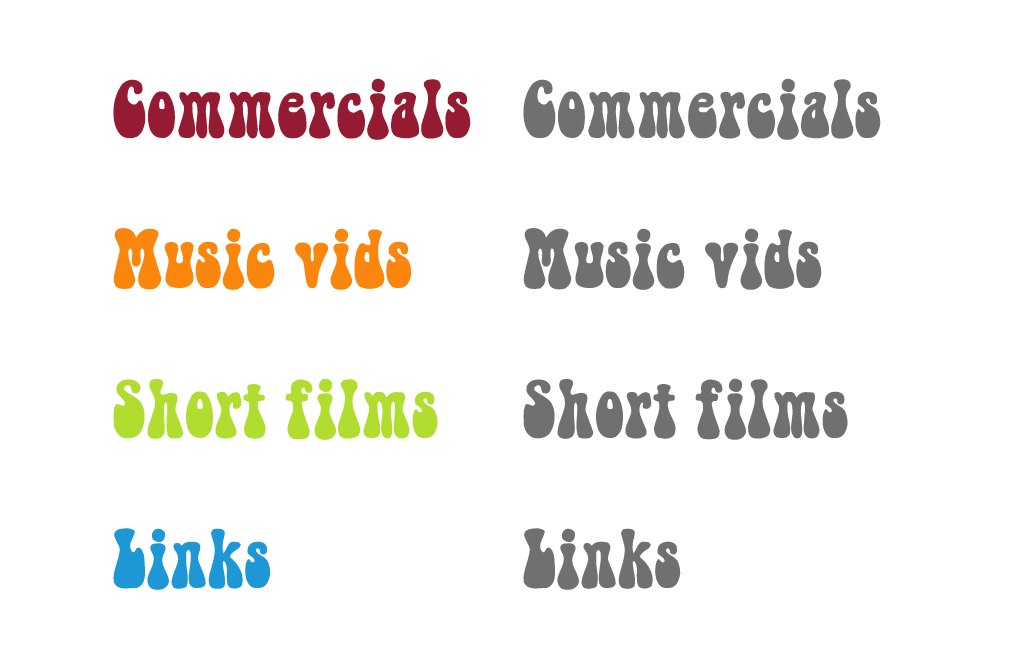
<style>
.page{position:relative;width:1017px;height:659px;background:#ffffff}
.page>*{position:absolute;margin:0}
.t1{font:72px "BellBottom.Laser";color:#951b32}
.t2{font:72px "BellBottom.Laser";color:#707070}
.t3{font:72px "BellBottom.Laser";color:#f9870d}
.t4{font:72px "BellBottom.Laser";color:#b1dd30}
.t5{font:72px "BellBottom.Laser";color:#1d97d6}
</style>
<div class="page">
<p class="t1" style="left:113px;top:78px;width:358px;height:62px">Commercials</p>
<p class="t2" style="left:523px;top:78px;width:358px;height:62px">Commercials</p>
<p class="t3" style="left:113px;top:228px;width:299px;height:62px">Music vids</p>
<p class="t2" style="left:523px;top:228px;width:299px;height:62px">Music vids</p>
<p class="t4" style="left:113px;top:378px;width:325px;height:62px">Short films</p>
<p class="t2" style="left:523px;top:378px;width:325px;height:62px">Short films</p>
<p class="t5" style="left:113px;top:528px;width:158px;height:62px">Links</p>
<p class="t2" style="left:523px;top:528px;width:158px;height:62px">Links</p>
</div>
